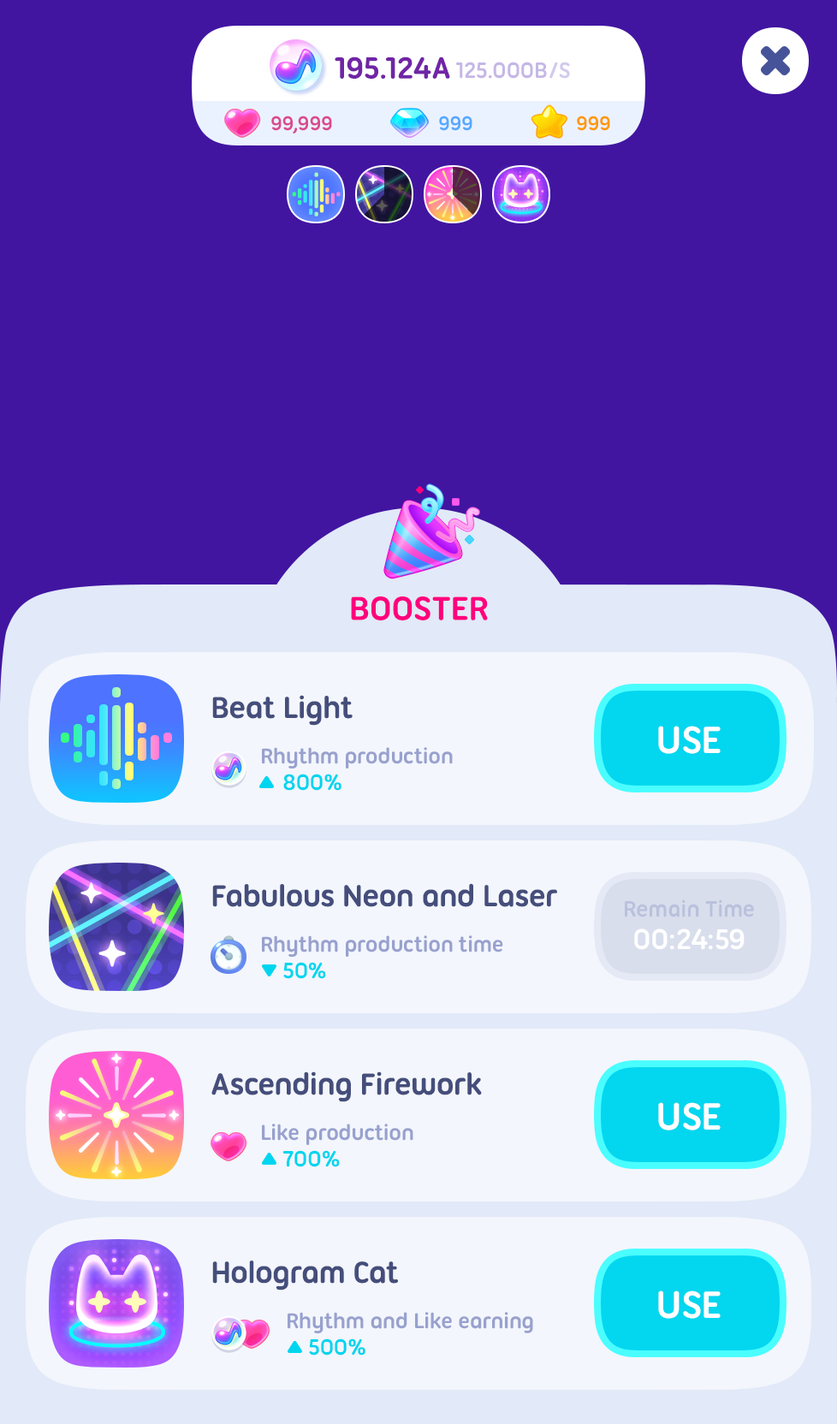
<style>
.page{position:relative;width:837px;height:1424px;background:#4115a0}
.page>*{position:absolute;margin:0}
.t1{font:36px "UbuntuTitling-Bold";letter-spacing:-0.025em;color:#ff007d;text-transform:uppercase}
.t2{font:32.5px "UbuntuTitling-Bold";letter-spacing:-0.025em;color:#454e7b}
.t3{font:41.1px "UbuntuTitling-Bold";letter-spacing:-0.025em;color:#ffffff}
.t4{font:23.1px "UbuntuTitling-Bold";letter-spacing:-0.025em;color:#98a1ce}
.t5{font:24px "UbuntuTitling-Bold";letter-spacing:-0.025em;color:#00d5ef}
.t6{font:24px "UbuntuTitling-Bold";letter-spacing:-0.025em;color:#b9c1dc}
.t7{font:30.8px "UbuntuTitling-Bold";letter-spacing:-0.025em;color:#ffffff}
</style>
<div class="page">
<p class="t1" style="left:351px;top:597px;width:137px;height:24px">Booster</p>
<p class="t2" style="left:212px;top:695px;width:141px;height:31px">Beat Light</p>
<p class="t3" style="left:658px;top:726px;width:63px;height:28px">USE</p>
<p class="t4" style="left:262px;top:747px;width:191px;height:22px">Rhythm production</p>
<p class="t5" style="left:283px;top:774px;width:59px;height:17px">800%</p>
<p class="t2" style="left:212px;top:883px;width:345px;height:24px">Fabulous Neon and Laser</p>
<p class="t6" style="left:625px;top:900px;width:129px;height:18px">Remain Time</p>
<p class="t7" style="left:634px;top:929px;width:111px;height:21px">00:24:59</p>
<p class="t4" style="left:262px;top:936px;width:241px;height:21px">Rhythm production time</p>
<p class="t5" style="left:283px;top:962px;width:43px;height:17px">50%</p>
<p class="t2" style="left:211px;top:1072px;width:271px;height:31px">Ascending Firework</p>
<p class="t3" style="left:658px;top:1103px;width:63px;height:28px">USE</p>
<p class="t4" style="left:262px;top:1124px;width:151px;height:21px">Like production</p>
<p class="t5" style="left:282px;top:1150px;width:58px;height:18px">700%</p>
<p class="t2" style="left:212px;top:1261px;width:186px;height:30px">Hologram Cat</p>
<p class="t3" style="left:658px;top:1291px;width:63px;height:28px">USE</p>
<p class="t4" style="left:288px;top:1312px;width:245px;height:22px">Rhythm and Like earning</p>
<p class="t5" style="left:309px;top:1339px;width:57px;height:17px">500%</p>
</div>
